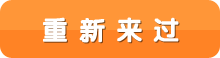
<style>
.page{position:relative;width:220px;height:58px;background:#ff9638}
.page>*{position:absolute;margin:0}
.t1{font:26px "JCuYuan";letter-spacing:0.4em;color:#ffffff;font-weight:bold}
</style>
<div class="page">
<p class="t1" style="left:43px;top:17px;width:136px;height:26px">重新来过</p>
</div>
